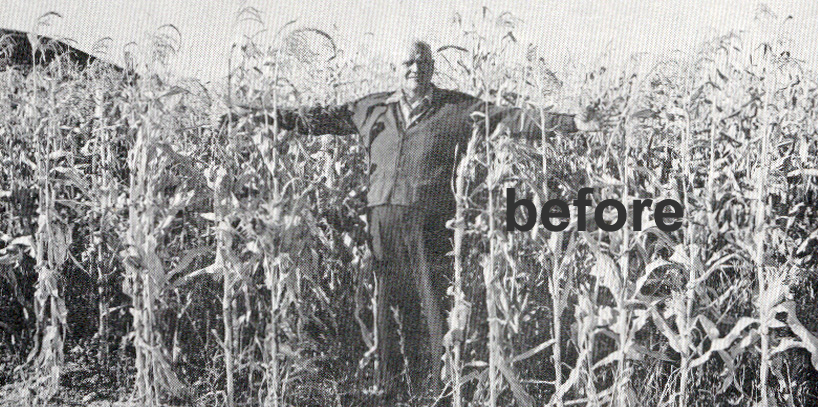
<style>
.page{position:relative;width:818px;height:407px}
.page>*{position:absolute;margin:0}
.t1{font:60px "Arial-BoldMT";color:#333333}
</style>
<div class="page">
<p class="t1" style="left:506px;top:187px;width:178px;height:45px">before</p>
</div>
